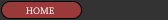
<style>
.page{position:relative;width:168px;height:20px;background:#333333}
.page>*{position:absolute;margin:0}
.t1{font:10px "ChaparralPro-Regular";color:#ffffff}
</style>
<div class="page">
<p class="t1" style="left:26px;top:7px;width:28px;height:7px">HOME</p>
</div>
